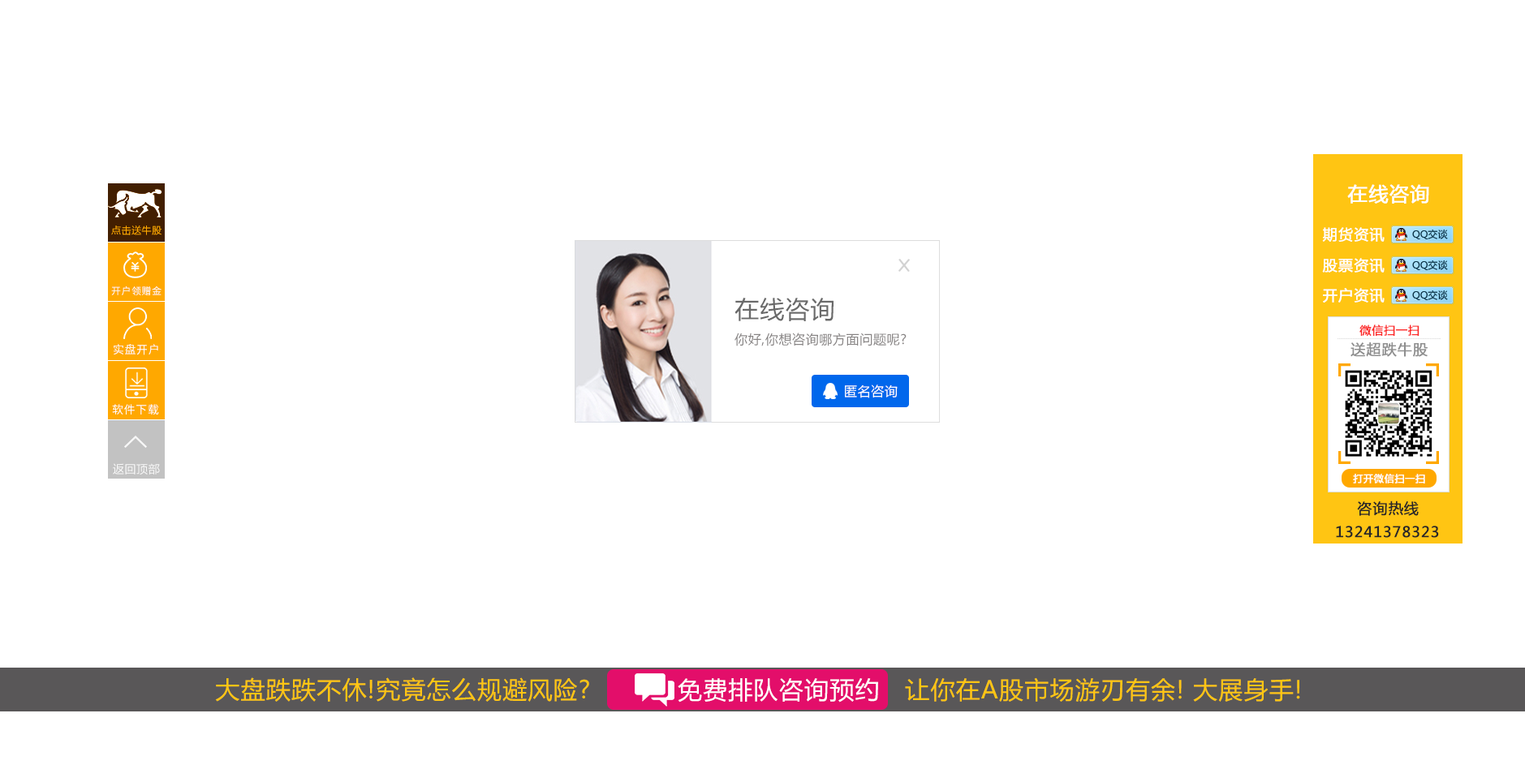
<style>
.page{position:relative;width:1525px;height:782px;background:#ffffff}
.page>*{position:absolute;margin:0}
.t1{font:19.5px "MicrosoftYaHei";letter-spacing:0.04em;color:#ffffff;font-weight:bold}
.t2{font:9.7px "MicrosoftYaHei";letter-spacing:0.04em;color:#ffa800}
.t3{font:14.6px "MicrosoftYaHei";letter-spacing:0.04em;color:#ffffff;font-weight:bold}
.t4{font:9.7px "SourceHanSansSC-Regular";letter-spacing:0.04em;color:#ffffff}
.t5{font:24.3px "MicrosoftYaHei";letter-spacing:0.04em;color:#696969}
.t6{font:11.4px "MicrosoftYaHei";letter-spacing:0.04em;color:#fc2828;font-weight:bold}
.t7{font:13px "MicrosoftYaHei";letter-spacing:0.04em;color:#878484}
.t8{font:11.4px "SourceHanSansSC-Regular";letter-spacing:0.04em;color:#ffffff}
.t9{font:14.6px "MicrosoftYaHei";letter-spacing:0.04em;color:#8e8e8e;font-weight:bold}
.t10{font:13px "MicrosoftYaHei";letter-spacing:0.04em;color:#ffffff}
.t11{font:11.4px "MicrosoftYaHei";letter-spacing:0.04em;color:#f8f8f8}
.t12{font:9.7px "MicrosoftYaHei";letter-spacing:0.04em;color:#ffffff;font-weight:bold}
.t13{font:14.6px "MicrosoftYaHei";letter-spacing:0.04em;color:#282727;font-weight:bold}
.t14{font:24.3px "MicrosoftYaHei";letter-spacing:0.04em;color:#ffc513}
.t15{font:24.3px "MicrosoftYaHei";letter-spacing:0.04em;color:#ffffff}
</style>
<div class="page">
<p class="t1" style="left:1347px;top:184px;width:82px;height:20px">在线咨询</p>
<p class="t2" style="left:111px;top:226px;width:50px;height:9px">点击送牛股</p>
<p class="t3" style="left:1322px;top:227px;width:62px;height:15px">期货资讯</p>
<p class="t3" style="left:1322px;top:258px;width:62px;height:15px">股票资讯</p>
<p class="t4" style="left:111px;top:286px;width:50px;height:9px">开户领赠金</p>
<p class="t3" style="left:1323px;top:288px;width:61px;height:15px">开户资讯</p>
<p class="t5" style="left:734px;top:298px;width:99px;height:23px">在线咨询</p>
<p class="t6" style="left:1359px;top:325px;width:60px;height:11px">微信扫一扫</p>
<p class="t7" style="left:734px;top:333px;width:172px;height:13px">你好,你想咨询哪方面问题呢?</p>
<p class="t8" style="left:114px;top:344px;width:44px;height:11px">实盘开户</p>
<p class="t9" style="left:1350px;top:342px;width:77px;height:15px">送超跌牛股</p>
<p class="t10" style="left:845px;top:385px;width:52px;height:13px">匿名咨询</p>
<p class="t8" style="left:112px;top:404px;width:47px;height:11px">软件下载</p>
<p class="t11" style="left:113px;top:463px;width:47px;height:12px">返回顶部</p>
<p class="t12" style="left:1353px;top:474px;width:72px;height:10px">打开微信扫一扫</p>
<p class="t13" style="left:1357px;top:501px;width:61px;height:15px">咨询热线</p>
<p class="t13" style="left:1336px;top:526px;width:103px;height:12px">13241378323</p>
<p class="t14" style="left:215px;top:677px;width:374px;height:25px">大盘跌跌不休!究竟怎么规避风险?</p>
<p class="t14" style="left:905px;top:677px;width:395px;height:26px">让你在A股市场游刃有余! 大展身手!</p>
<p class="t15" style="left:677px;top:678px;width:201px;height:25px">免费排队咨询预约</p>
</div>
